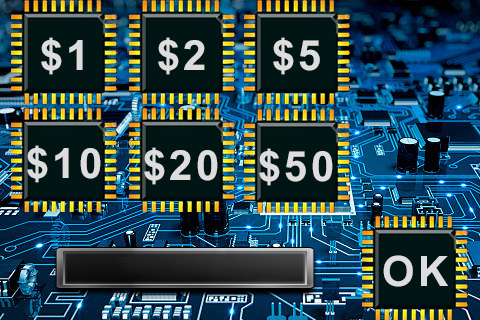
<style>
.page{position:relative;width:480px;height:320px}
.page>*{position:absolute;margin:0}
.t1{font:41.7px "Arial-BoldMT";letter-spacing:0.075em;color:#dddddd}
</style>
<div class="page">
<p class="t1" style="left:41px;top:37px;width:42px;height:38px">$1</p>
<p class="t1" style="left:158px;top:37px;width:47px;height:38px">$2</p>
<p class="t1" style="left:273px;top:37px;width:47px;height:38px">$5</p>
<p class="t1" style="left:27px;top:145px;width:74px;height:38px">$10</p>
<p class="t1" style="left:144px;top:147px;width:74px;height:38px">$20</p>
<p class="t1" style="left:259px;top:148px;width:74px;height:38px">$50</p>
<p class="t1" style="left:383px;top:255px;width:65px;height:32px">OK</p>
</div>
